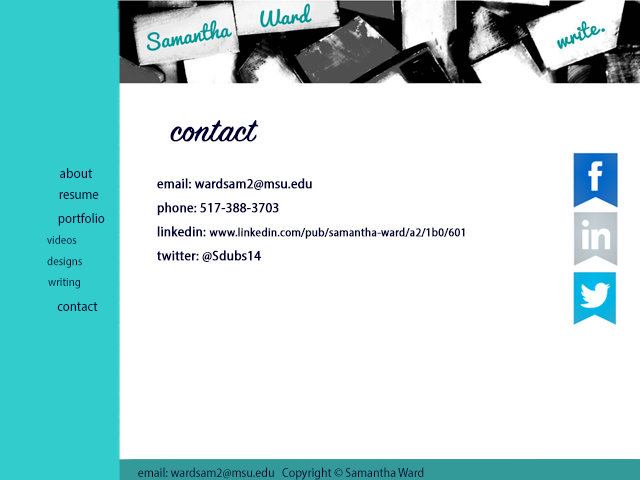
<style>
.page{position:relative;width:640px;height:480px;background:#ffffff}
.page>*{position:absolute;margin:0}
.t1{font:36px "SignPainter-HouseScript";color:#000033;font-weight:bold}
.t2{font:14px "MyriadPro-SemiCn";color:#000033;scale:1.03 1}
.t3{font:14px/24px "MyriadPro-SemiCn";color:#000033;font-weight:bold}
.t4{font:12px/24px "MyriadPro-SemiCn";color:#000033;font-weight:bold}
.t5{font:14px "MyriadPro-SemiCn";color:#000033}
.t6{font:12px "MyriadPro-SemiCn";color:#000033}
.t7{font:13px "MyriadPro-SemiCn";color:#000033}
</style>
<div class="page">
<p class="t1" style="left:170px;top:120px;width:89px;height:22px">contact</p>
<p class="t2" style="left:60px;top:168px;width:33px;height:10px">about</p>
<p class="t3" style="left:157px;top:178px;width:308px;height:84px">email: wardsam2@msu.edu<br>phone: 517-388-3703<br>linkedin: <span class="t4">www.linkedin.com/pub/samantha-ward/a2/1b0/601<br></span>twitter: @Sdubs14</p>
<p class="t5" style="left:59px;top:192px;width:40px;height:7px">resume</p>
<p class="t5" style="left:58px;top:213px;width:47px;height:13px">portfolio</p>
<p class="t6" style="left:47px;top:235px;width:30px;height:9px">videos</p>
<p class="t6" style="left:47px;top:256px;width:35px;height:12px">designs</p>
<p class="t6" style="left:48px;top:278px;width:32px;height:11px">writing</p>
<p class="t5" style="left:57px;top:302px;width:41px;height:9px">contact</p>
<p class="t7" style="left:138px;top:467px;width:286px;height:13px">email: wardsam2@msu.edu   Copyright © Samantha Ward</p>
</div>
